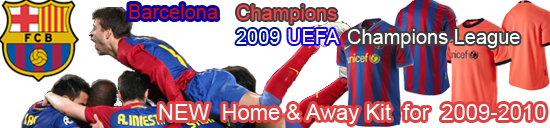
<style>
.page{position:relative;width:550px;height:128px;background:#ffffff}
.page>*{position:absolute;margin:0}
.t1{font:20px "ArialMT";color:#c60f0f}
.t2{font:20px "ArialMT";color:#ff4247}
.t3{font:20px "ArialMT";color:#ffffff}
.t4{font:22px "ArialMT";color:#ffffff}
</style>
<div class="page">
<p class="t1" style="left:129px;top:4px;width:89px;height:15px">Barcelona</p>
<p class="t2" style="left:236px;top:5px;width:101px;height:19px">Champions</p>
<p class="t3" style="left:236px;top:29px;width:44px;height:15px">2009</p>
<p class="t3" style="left:288px;top:29px;width:52px;height:15px">UEFA</p>
<p class="t3" style="left:347px;top:29px;width:173px;height:19px">Champions League</p>
<p class="t4" style="left:159px;top:104px;width:387px;height:20px">NEW  Home &amp; Away Kit  for  2009-2010</p>
</div>
